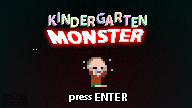
<style>
.page{position:relative;width:192px;height:108px}
.page>*{position:absolute;margin:0}
.t1{font:17.9px "MyriadPro-Bold";color:#ffffff}
.t2{font:8px/7px "MyriadPro-Regular";color:#0d1011}
.t3{font:10px "MyriadPro-Bold";color:#ffffff}
.t4{font:11px "MyriadPro-Bold";color:#ffffff}
</style>
<div class="page">
<p class="t1" style="left:47px;top:29px;width:97px;height:15px">MONSTER</p>
<p class="t2" style="left:2px;top:93px;width:25px;height:13px;text-align:center">Ludum <br>Dare 33</p>
<p class="t3" style="left:69px;top:95px;width:23px;height:7px">press</p>
<p class="t4" style="left:95px;top:93px;width:32px;height:8px">ENTER</p>
</div>
